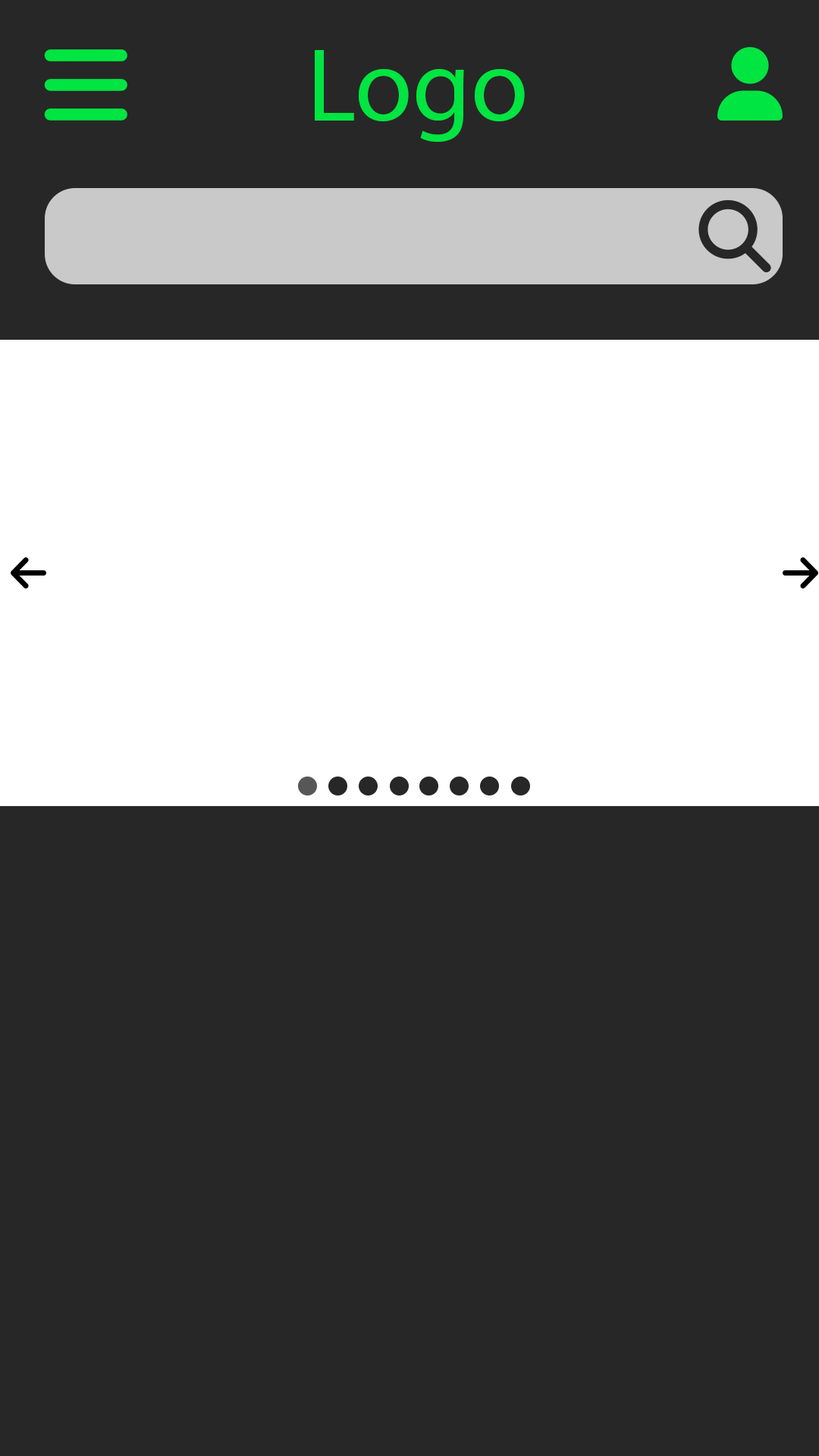
<style>
.page{position:relative;width:819px;height:1456px;background:#272727}
.page>*{position:absolute;margin:0}
.t1{font:104.4px "MyriadPro-Regular";color:#00e541}
</style>
<div class="page">
<p class="t1" style="left:315px;top:50px;width:210px;height:92px">Logo</p>
</div>
